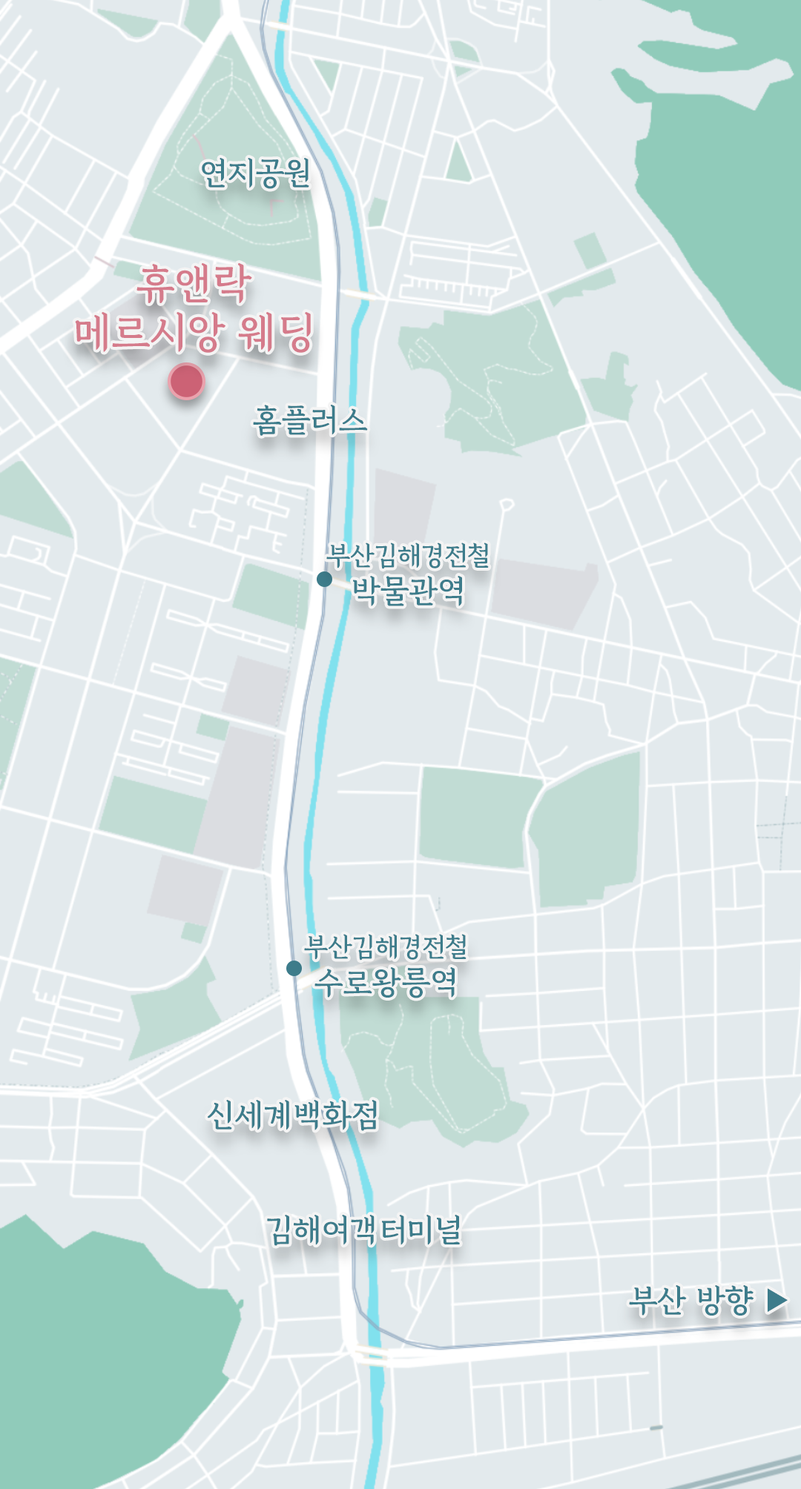
<style>
.page{position:relative;width:801px;height:1489px;background:#e3eaed}
.page>*{position:absolute;margin:0}
.t1{font:30.9px "GyeonggiBatangB";color:#3d7c8b}
.t2{font:41.2px "GyeonggiBatangB";color:#d57b8b}
.t3{font:25.7px "GyeonggiBatangB";color:#3d7c8b}
</style>
<div class="page">
<p class="t1" style="left:202px;top:158px;width:107px;height:31px">연지공원</p>
<p class="t2" style="left:75px;top:263px;width:236px;height:90px;text-align:center">휴앤락<br>메르시앙 웨딩</p>
<p class="t1" style="left:253px;top:405px;width:115px;height:31px">홈플러스</p>
<p class="t3" style="left:326px;top:543px;width:163px;height:63px;text-align:center">부산김해경전철<br><span class="t1">박물관역</span></p>
<p class="t3" style="left:304px;top:934px;width:162px;height:65px;text-align:center">부산김해경전철<br><span class="t1">수로왕릉역</span></p>
<p class="t1" style="left:208px;top:1100px;width:169px;height:31px">신세계백화점</p>
<p class="t1" style="left:267px;top:1215px;width:193px;height:31px">김해여객터미널</p>
<p class="t1" style="left:629px;top:1285px;width:158px;height:31px">부산 방향 ▶</p>
</div>
